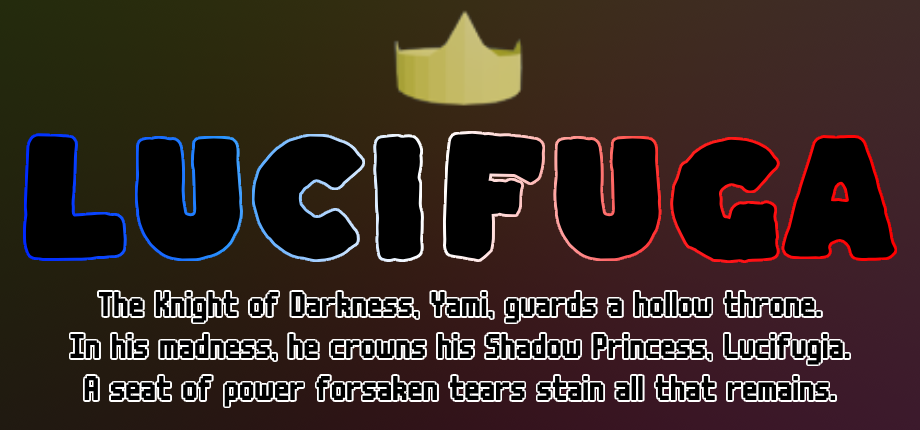
<style>
.page{position:relative;width:920px;height:430px;background:#000000}
.page>*{position:absolute;margin:0}
.t1{font:142px "Kaph-Regular";color:#000000}
.t2{font:35px "m6x11";color:#000000}
</style>
<div class="page">
<p class="t1" style="left:25px;top:136px;width:396px;height:124px">Luci</p>
<p class="t1" style="left:445px;top:133px;width:450px;height:128px">fuga</p>
<p class="t2" style="left:70px;top:291px;width:780px;height:116px;text-align:center">The Knight of Darkness, Yami, guards a hollow throne.<br>In his madness, he crowns his Shadow Princess, Lucifugia.<br>A seat of power forsaken tears stain all that remains.</p>
</div>
